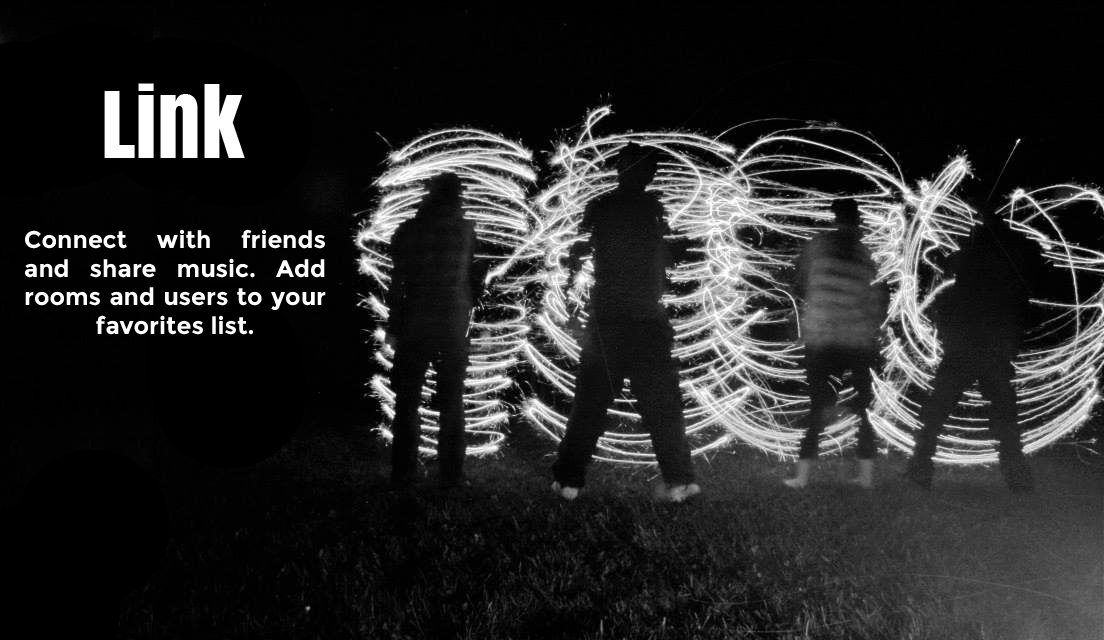
<style>
.page{position:relative;width:1104px;height:640px}
.page>*{position:absolute;margin:0}
.t1{font:86px "Anton";color:#ffffff}
.t2{font:24px "Montserrat-Bold";color:#ffffff}
</style>
<div class="page">
<p class="t1" style="left:104px;top:83px;width:141px;height:75px">Link</p>
<p class="t2" style="left:25px;top:229px;width:301px;height:106px;text-align:justify">Connect with friends and share music. Add rooms and users to your favorites list.</p>
</div>
